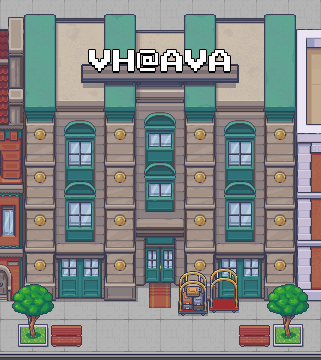
<style>
.page{position:relative;width:321px;height:360px}
.page>*{position:absolute;margin:0}
.t1{font:24px "PressStart2P-Regular";color:#ffffff}
</style>
<div class="page">
<p class="t1" style="left:89px;top:50px;width:141px;height:21px">VH@AVA</p>
</div>
